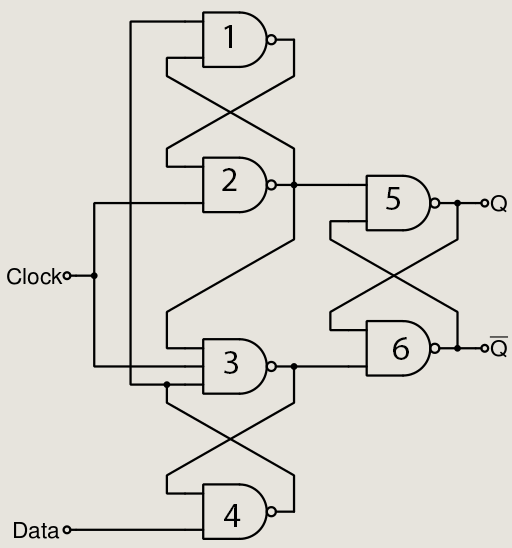
<style>
.page{position:relative;width:512px;height:548px;background:#e7e4dd}
.page>*{position:absolute;margin:0}
.t1{font:35px "MyriadPro-Regular";color:#000000}
</style>
<div class="page">
<p class="t1" style="left:224px;top:25px;width:8px;height:23px">1</p>
<p class="t1" style="left:222px;top:168px;width:15px;height:23px">2</p>
<p class="t1" style="left:386px;top:187px;width:14px;height:23px">5</p>
<p class="t1" style="left:393px;top:337px;width:16px;height:23px">6</p>
<p class="t1" style="left:224px;top:351px;width:14px;height:23px">3</p>
<p class="t1" style="left:224px;top:504px;width:17px;height:23px">4</p>
</div>
